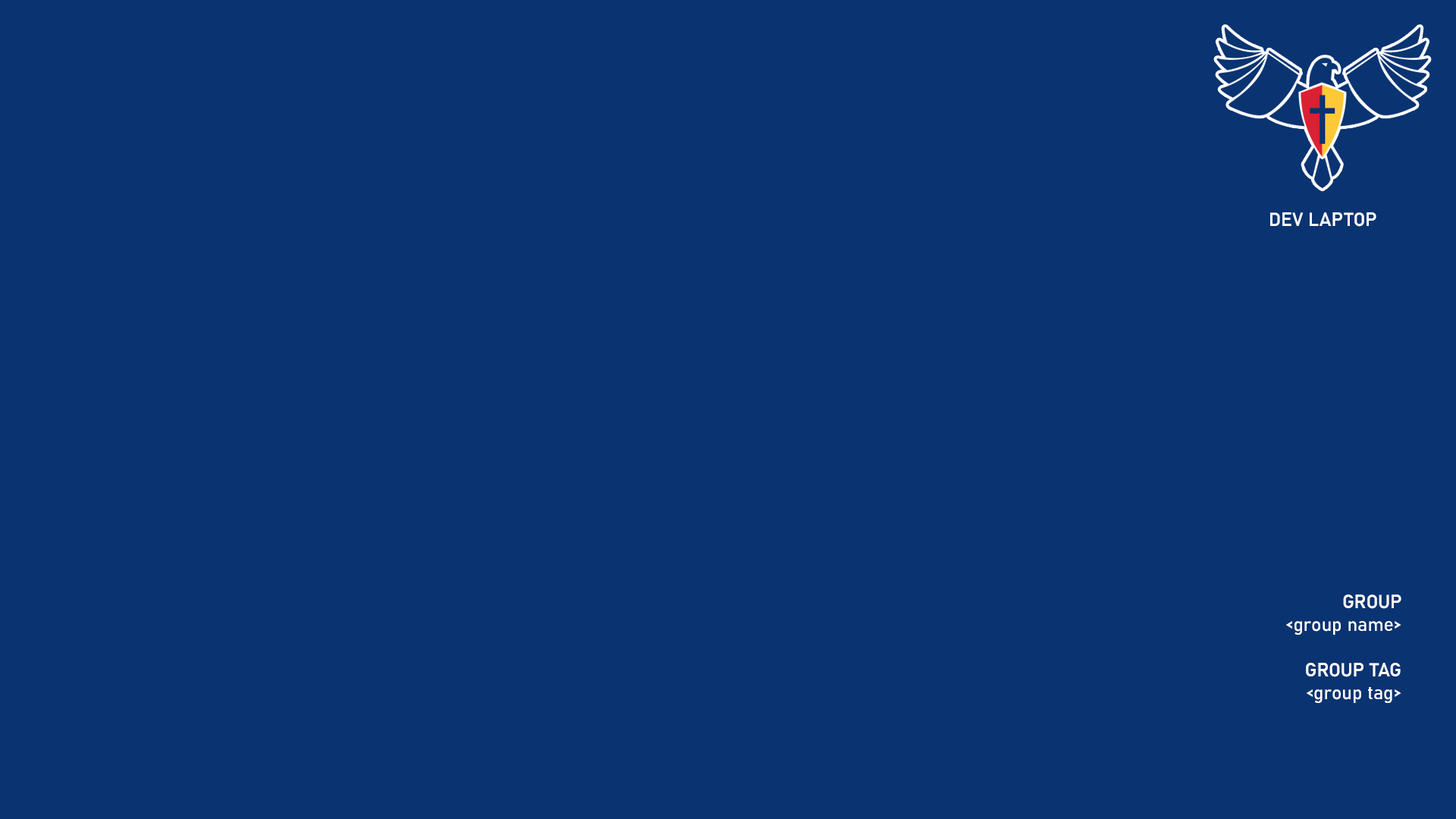
<style>
.page{position:relative;width:1456px;height:819px;background:#0a3371}
.page>*{position:absolute;margin:0}
.t1{font:18.8px "Bahnschrift-SemiBold";color:#ffffff}
.t2{font:18.8px "Bahnschrift";color:#ffffff}
</style>
<div class="page">
<p class="t1" style="left:1270px;top:212px;width:106px;height:15px">DEV LAPTOP</p>
<p class="t2" style="left:1286px;top:595px;width:115px;height:108px;text-align:right"><span class="t1">GROUP<br></span>&lt;group name&gt;<br><br><span class="t1">GROUP TAG<br></span>&lt;group tag&gt;</p>
</div>
